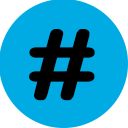
<style>
.page{position:relative;width:128px;height:128px;background:#00abe4}
.page>*{position:absolute;margin:0}
.t1{font:96.2px "ArialRoundedMTBold";color:#000000;scale:1.26 1}
</style>
<div class="page">
<p class="t1" style="left:29px;top:29px;width:66px;height:72px">#</p>
</div>
